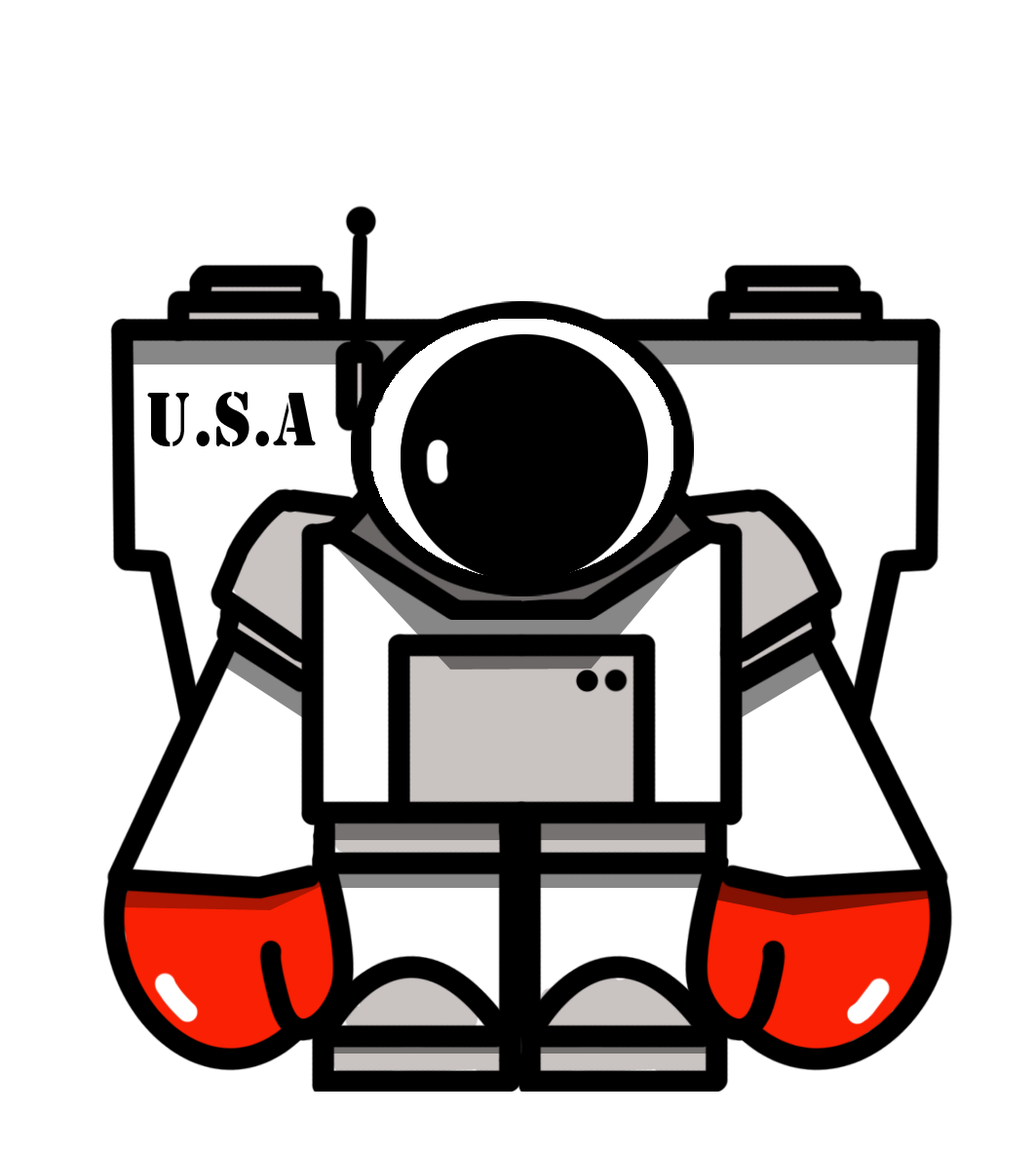
<style>
.page{position:relative;width:1036px;height:1151px;background:#ffffff}
.page>*{position:absolute;margin:0}
.t1{font:70.9px "StencilStd";color:#000000;scale:0.85 1}
</style>
<div class="page">
<p class="t1" style="left:147px;top:392px;width:169px;height:54px">U.S.A</p>
</div>
